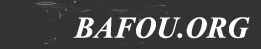
<style>
.page{position:relative;width:261px;height:49px;background:#333333}
.page>*{position:absolute;margin:0}
.t1{font:30px "TimesNewRomanPS-BoldItalicMT";color:#fbfbfc}
</style>
<div class="page">
<p class="t1" style="left:73px;top:17px;width:177px;height:22px">BAFOU.ORG</p>
</div>
